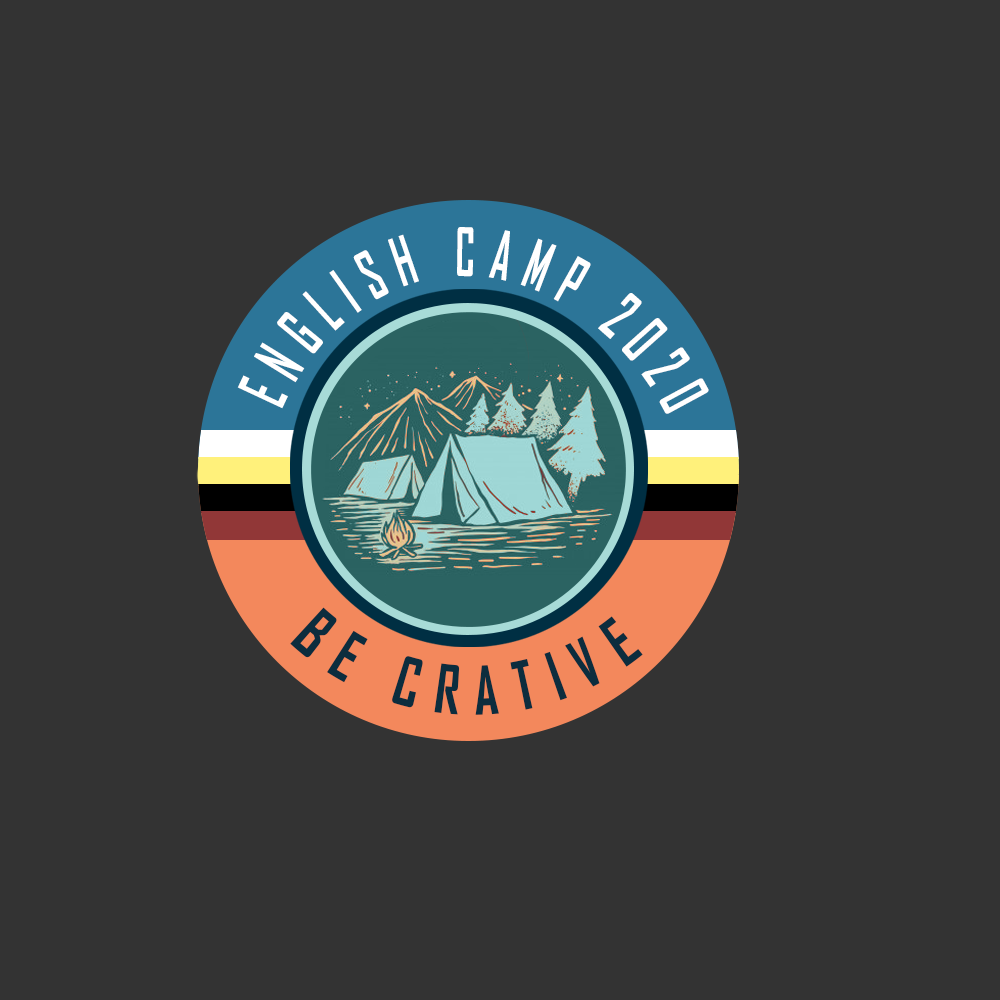
<style>
.page{position:relative;width:1000px;height:1000px;background:#333333}
.page>*{position:absolute;margin:0}
.t1{font:64.3px "AgencyFB-Bold";letter-spacing:0.3em;color:#ffffff;text-transform:uppercase;scale:0.66 1}
.t2{font:64.3px "AgencyFB-Bold";letter-spacing:0.3em;color:#0c2d3e;text-transform:uppercase;scale:0.66 1}
</style>
<div class="page">
<p class="t1" style="left:237px;top:227px;width:472px;height:187px;rotate:-5deg">english camp 2020</p>
<p class="t2" style="left:290px;top:607px;width:353px;height:108px">be crative</p>
</div>
